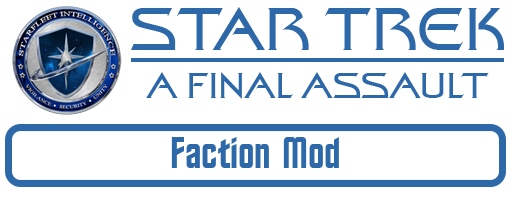
<style>
.page{position:relative;width:512px;height:200px;background:#ffffff}
.page>*{position:absolute;margin:0}
.t1{font:60px "StarTrekFilmBT-Regular";color:#2d68a9}
.t2{font:36px "StarTrekFilmBT-Regular";color:#2d68a9}
.t3{font:44px "StarTrekBT-Regular";color:#2d68a9}
</style>
<div class="page">
<p class="t1" style="left:131px;top:7px;width:373px;height:43px">STAR TREK</p>
<p class="t2" style="left:146px;top:72px;width:343px;height:27px">A FINAL ASSAULT</p>
<p class="t3" style="left:171px;top:137px;width:168px;height:31px">Faction Mod</p>
</div>
